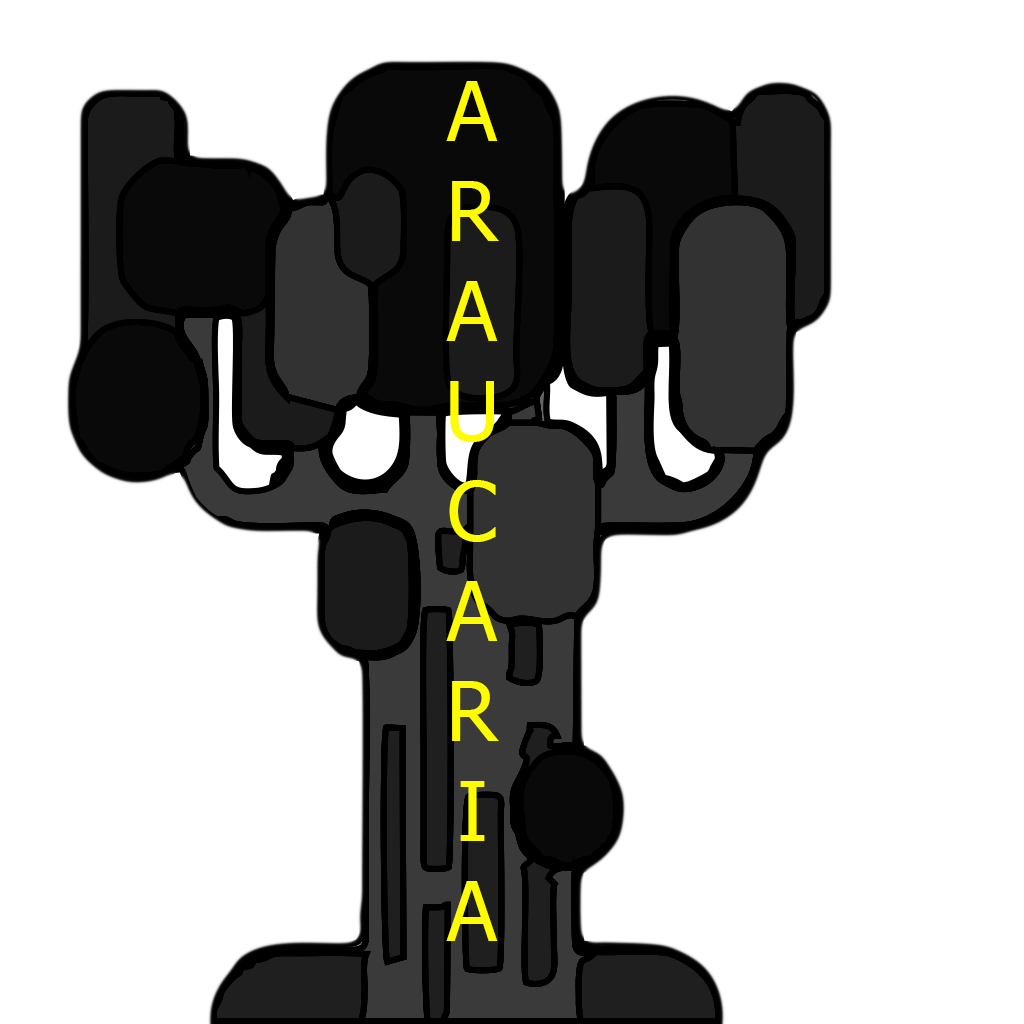
<style>
.page{position:relative;width:1024px;height:1024px;background:#ffffff}
.page>*{position:absolute;margin:0}
.t1{font:83.3px "Tahoma";color:#fffc00}
</style>
<div class="page">
<p class="t1" style="left:446px;top:81px;width:53px;height:860px;text-align:center">A<br>R<br>A<br>U<br>C<br>A<br>R<br>I<br>A</p>
</div>
